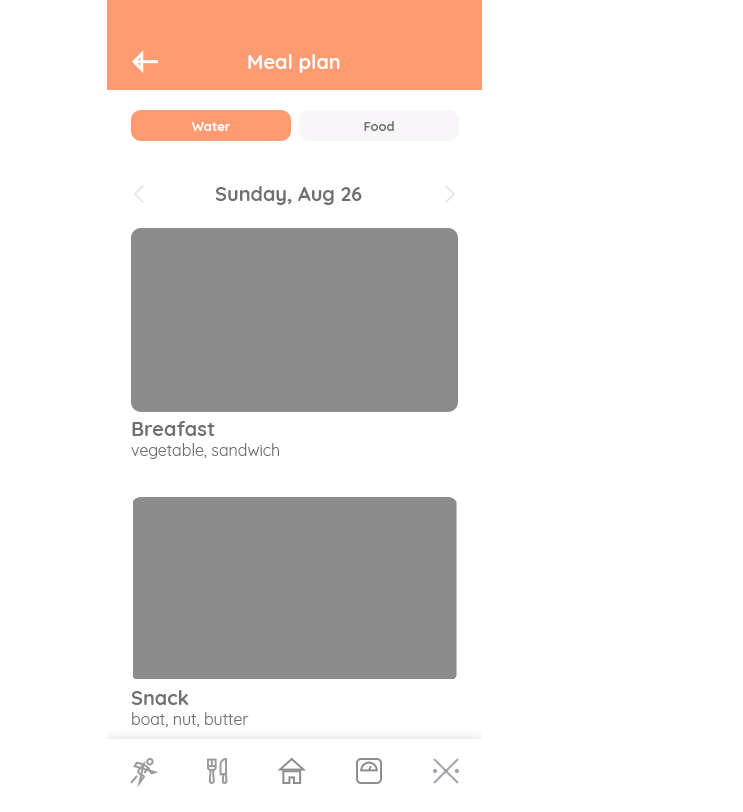
<style>
.page{position:relative;width:743px;height:812px;background:#ffffff}
.page>*{position:absolute;margin:0}
.t1{font:20px "Quicksand-Bold";color:#ffffff}
.t2{font:13px "Quicksand-Bold";color:#ffffff}
.t3{font:13px "Quicksand-Bold";color:#707070}
.t4{font:20px "Quicksand-Bold";color:#707070}
.t5{font:16px "Quicksand-Regular";color:#707070}
</style>
<div class="page">
<p class="t1" style="left:248px;top:54px;width:92px;height:19px">Meal plan</p>
<p class="t2" style="left:192px;top:122px;width:39px;height:9px">Water</p>
<p class="t3" style="left:364px;top:121px;width:30px;height:10px">Food</p>
<p class="t4" style="left:215px;top:186px;width:147px;height:19px">Sunday, Aug 26</p>
<p class="t4" style="left:132px;top:421px;width:83px;height:15px">Breafast</p>
<p class="t5" style="left:131px;top:443px;width:148px;height:16px">vegetable, sandwich</p>
<p class="t4" style="left:131px;top:690px;width:58px;height:15px">Snack</p>
<p class="t5" style="left:132px;top:712px;width:117px;height:15px">boat, nut, butter</p>
</div>
